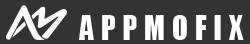
<style>
.page{position:relative;width:250px;height:44px;background:#333333}
.page>*{position:absolute;margin:0}
.t1{font:30.6px "Impact";letter-spacing:0.25em;color:#ffffff;text-transform:uppercase;scale:0.94 1}
</style>
<div class="page">
<p class="t1" style="left:79px;top:15px;width:165px;height:25px">APPMOFIX</p>
</div>
